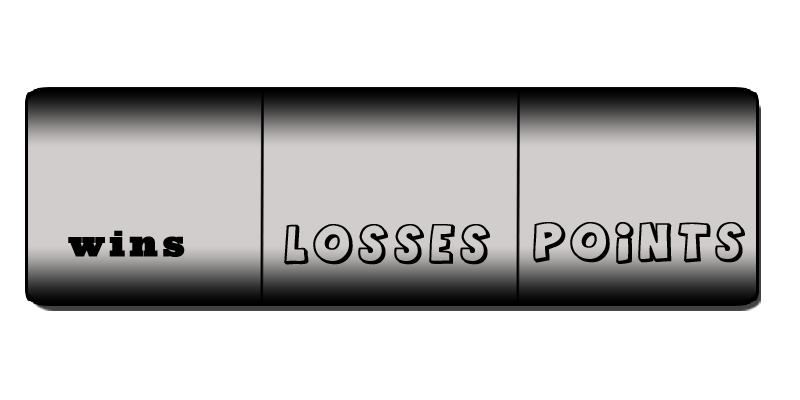
<style>
.page{position:relative;width:800px;height:400px;background:#ffffff}
.page>*{position:absolute;margin:0}
.t1{font:36px "AgentOrange";letter-spacing:0.125em;color:#000000;font-weight:bold}
.t2{font:36px "Ziggurat-HTF-Black";letter-spacing:0.125em;color:#000000;font-weight:bold}
</style>
<div class="page">
<p class="t1" style="left:533px;top:222px;width:212px;height:42px">points</p>
<p class="t2" style="left:68px;top:230px;width:117px;height:27px">wins</p>
<p class="t1" style="left:284px;top:224px;width:206px;height:41px">Losses</p>
</div>
